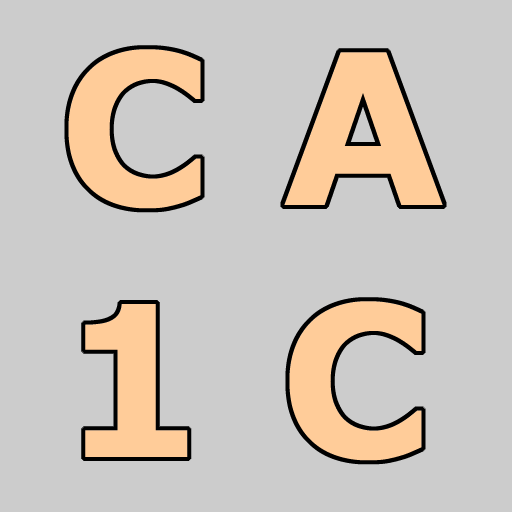
<style>
.page{position:relative;width:512px;height:512px;background:#cccccc}
.page>*{position:absolute;margin:0}
.t1{font:210.1px "Verdana-Bold";color:#ffcc99}
</style>
<div class="page">
<p class="t1" style="left:68px;top:51px;width:375px;height:412px">C A<br>1 C</p>
</div>
